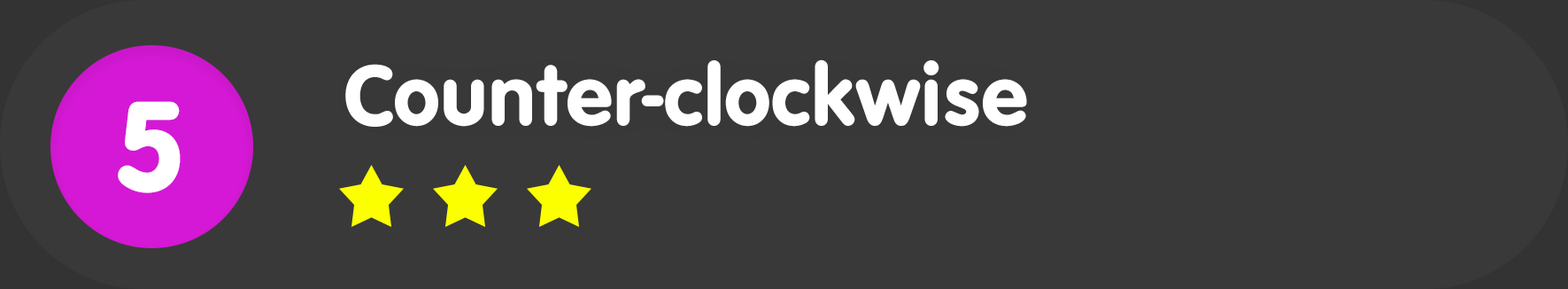
<style>
.page{position:relative;width:1568px;height:289px;background:#393939}
.page>*{position:absolute;margin:0}
.t1{font:88.5px "VAGRundschriftD";color:#ffffff}
.t2{font:132.8px "VAGRundschriftD";color:#ffffff}
</style>
<div class="page">
<p class="t1" style="left:345px;top:59px;width:682px;height:68px">Counter-clockwise</p>
<p class="t2" style="left:118px;top:101px;width:63px;height:92px">5</p>
</div>
